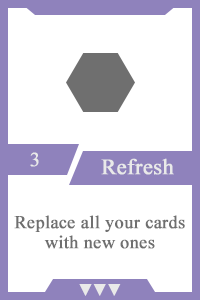
<style>
.page{position:relative;width:200px;height:300px;background:#ffffff}
.page>*{position:absolute;margin:0}
.t1{font:20px "TimesNewRomanPSMT";color:#e9e9e9;font-weight:bold}
.t2{font:22px "TimesNewRomanPSMT";color:#e9e9e9;font-weight:bold}
.t3{font:18px/20px "TimesNewRomanPSMT";color:#6f6f6f;font-weight:bold}
.t4{font:14px "AdobeHeitiStd-Regular";color:#e9e9e9;font-weight:bold}
</style>
<div class="page">
<p class="t1" style="left:30px;top:152px;width:9px;height:15px">3</p>
<p class="t2" style="left:101px;top:158px;width:73px;height:17px">Refresh</p>
<p class="t3" style="left:14px;top:215px;width:171px;height:34px;text-align:center">Replace all your cards with new ones</p>
<p class="t4" style="left:79px;top:284px;width:42px;height:12px">▼▼▼</p>
</div>
